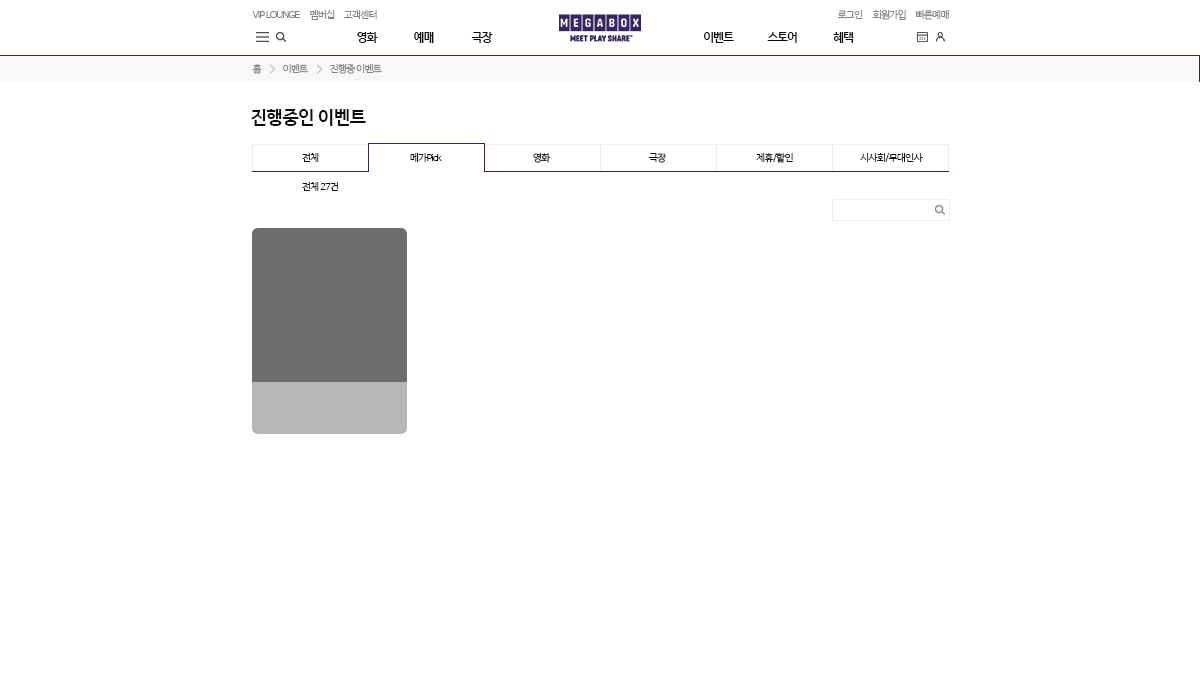
<style>
.page{position:relative;width:1200px;height:700px;background:#ffffff}
.page>*{position:absolute;margin:0}
.t1{font:10px "HancomGothicRegular";letter-spacing:-0.1em;color:#838383}
.t2{font:12px "HancomGothicBold";letter-spacing:-0.1em;color:#0e0d0d}
.t3{font:18px "HancomGothicBold";letter-spacing:-0.05em;color:#0e0d0d}
.t4{font:10px "HancomGothicRegular";letter-spacing:-0.1em;color:#0e0d0d}
.t5{font:10px "HancomGothicRegular";letter-spacing:-0.1em}
</style>
<div class="page">
<p class="t1" style="left:252px;top:11px;width:48px;height:7px">VIP LOUNGE</p>
<p class="t1" style="left:310px;top:10px;width:25px;height:10px">멤버십</p>
<p class="t1" style="left:343px;top:10px;width:34px;height:9px">고객센터</p>
<p class="t1" style="left:837px;top:10px;width:26px;height:9px">로그인</p>
<p class="t1" style="left:872px;top:10px;width:34px;height:10px">회원가입</p>
<p class="t1" style="left:916px;top:10px;width:33px;height:10px">빠른예매</p>
<p class="t2" style="left:357px;top:32px;width:21px;height:11px">영화</p>
<p class="t2" style="left:414px;top:32px;width:20px;height:11px">예매</p>
<p class="t2" style="left:471px;top:32px;width:22px;height:11px">극장</p>
<p class="t2" style="left:704px;top:32px;width:30px;height:11px">이벤트</p>
<p class="t2" style="left:767px;top:32px;width:30px;height:11px">스토어</p>
<p class="t2" style="left:833px;top:32px;width:21px;height:11px">혜택</p>
<p class="t1" style="left:252px;top:63px;width:10px;height:11px">홈</p>
<p class="t1" style="left:283px;top:64px;width:26px;height:9px">이벤트</p>
<p class="t1" style="left:330px;top:63px;width:52px;height:11px">진행중 이벤트</p>
<p class="t3" style="left:251px;top:109px;width:115px;height:17px">진행중인 이벤트</p>
<p class="t4" style="left:302px;top:153px;width:17px;height:9px">전체</p>
<p class="t4" style="left:410px;top:153px;width:32px;height:9px">메가Pick</p>
<p class="t5" style="left:533px;top:153px;width:18px;height:10px">영화</p>
<p class="t4" style="left:648px;top:153px;width:19px;height:10px">극장</p>
<p class="t4" style="left:756px;top:152px;width:37px;height:11px">제휴/할인</p>
<p class="t4" style="left:860px;top:153px;width:63px;height:9px">시사회/무대인사</p>
<p class="t4" style="left:302px;top:182px;width:37px;height:9px">전체 27건</p>
</div>
